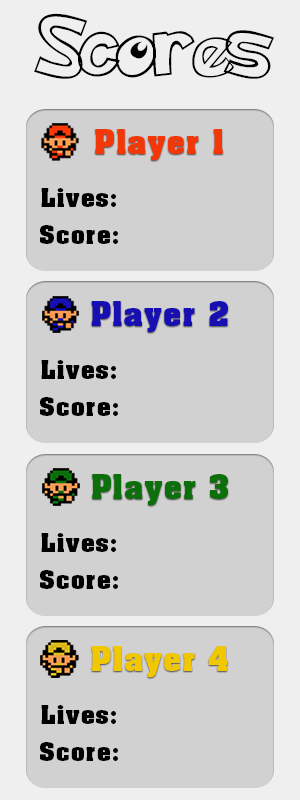
<style>
.page{position:relative;width:300px;height:800px;background:#d1d1d1}
.page>*{position:absolute;margin:0}
.t1{font:71.3px "PokemonHollowNormal";color:#000000}
.t2{font:28.6px "AachenStd-Bold";letter-spacing:0.06em;color:#f33808}
.t3{font:22px "AachenStd-Bold";letter-spacing:0.06em;color:#000000}
.t4{font:28.6px "AachenStd-Bold";letter-spacing:0.06em;color:#180fb3}
.t5{font:28.6px "AachenStd-Bold";letter-spacing:0.06em;color:#0b7009}
.t6{font:28.6px "AachenStd-Bold";letter-spacing:0.06em;color:#f1c700}
</style>
<div class="page">
<p class="t1" style="left:34px;top:13px;width:240px;height:66px">Scores</p>
<p class="t2" style="left:95px;top:129px;width:128px;height:32px">Player 1</p>
<p class="t3" style="left:41px;top:188px;width:75px;height:19px">Lives:</p>
<p class="t3" style="left:40px;top:225px;width:78px;height:19px">Score:</p>
<p class="t4" style="left:91px;top:301px;width:137px;height:32px">Player 2</p>
<p class="t3" style="left:41px;top:360px;width:75px;height:19px">Lives:</p>
<p class="t3" style="left:40px;top:397px;width:78px;height:19px">Score:</p>
<p class="t5" style="left:92px;top:474px;width:136px;height:32px">Player 3</p>
<p class="t3" style="left:41px;top:533px;width:75px;height:19px">Lives:</p>
<p class="t3" style="left:40px;top:570px;width:78px;height:19px">Score:</p>
<p class="t6" style="left:91px;top:646px;width:137px;height:32px">Player 4</p>
<p class="t3" style="left:41px;top:705px;width:75px;height:19px">Lives:</p>
<p class="t3" style="left:40px;top:742px;width:78px;height:19px">Score:</p>
</div>
